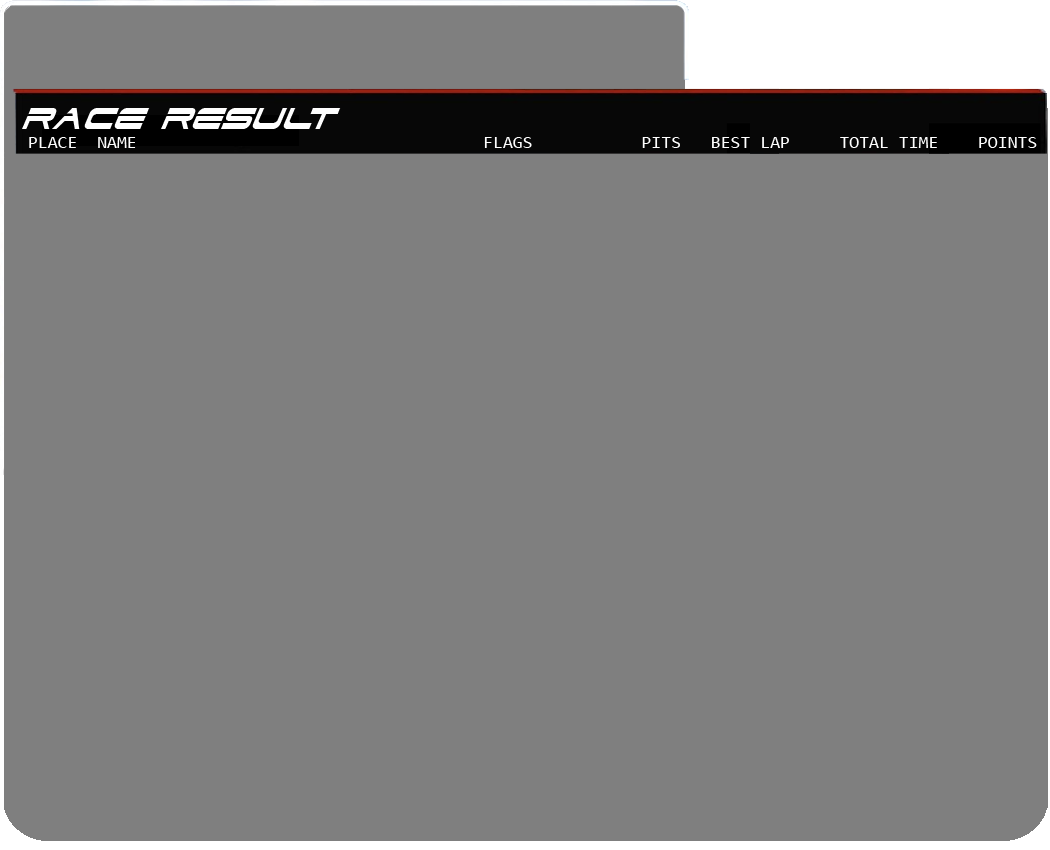
<style>
.page{position:relative;width:1050px;height:850px;background:#7f7f7f}
.page>*{position:absolute;margin:0}
.t1{font:36px "DodgerCondensedItalic";color:#fefefe;text-transform:uppercase}
.t2{font:18px "Consolas";color:#fefefe;text-transform:uppercase}
</style>
<div class="page">
<p class="t1" style="left:22px;top:108px;width:319px;height:21px">Race result</p>
<p class="t2" style="left:29px;top:137px;width:1008px;height:11px">Place  name                                   Flags           PitS   Best Lap     Total time    Points</p>
</div>
